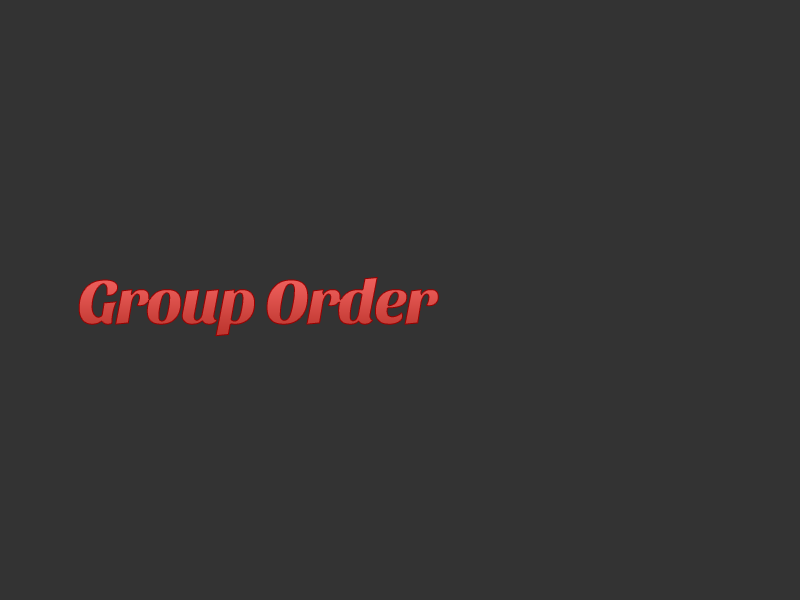
<style>
.page{position:relative;width:800px;height:600px;background:#333333}
.page>*{position:absolute;margin:0}
.t1{font:64px "SansitaOne";letter-spacing:-0.075em;color:#d34843;font-weight:bold}
</style>
<div class="page">
<p class="t1" style="left:78px;top:277px;width:361px;height:60px">Group Order</p>
</div>
